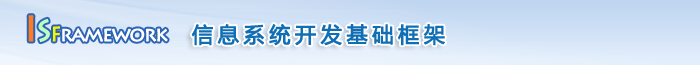
<style>
.page{position:relative;width:700px;height:65px}
.page>*{position:absolute;margin:0}
.t1{font:20px "LithosPro-Regular";letter-spacing:-0.08em;color:#ffffff;font-weight:bold}
.t2{font:36px "LithosPro-Regular";letter-spacing:-0.08em;color:#ff7a21;font-weight:bold}
.t3{font:30px "LithosPro-Regular";letter-spacing:-0.08em;color:#bbfebd;font-weight:bold}
.t4{font:20px "LithosPro-Regular";letter-spacing:-0.08em;color:#f8f500;font-weight:bold}
.t5{font:21px "MicrosoftYaHei";letter-spacing:0.2em;color:#106eb5;font-weight:bold}
</style>
<div class="page">
<p class="t1" style="left:28px;top:15px;width:140px;height:28px"><span class="t2">I</span><span class="t3">S</span><span class="t4">F</span>ramework</p>
<p class="t5" style="left:191px;top:23px;width:254px;height:23px">信息系统开发基础框架</p>
</div>
